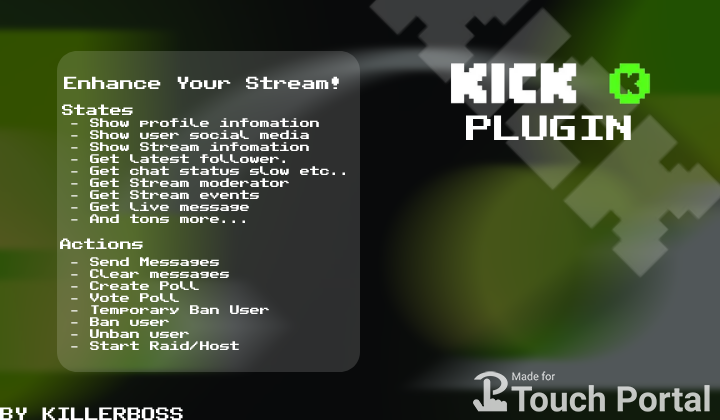
<style>
.page{position:relative;width:720px;height:420px}
.page>*{position:absolute;margin:0}
.t1{font:10px "PublicPixel";color:#ffffff}
.t2{font:14px "PublicPixel";color:#ffffff}
.t3{font:12px "PublicPixel";color:#ffffff}
.t4{font:28px "PublicPixel";color:#ffffff}
.t5{font:14.2px "PublicPixel";color:#ffffff}
</style>
<div class="page">
<p class="t1" style="left:59px;top:76px;width:286px;height:274px"><span class="t2">Enhance Your Stream!<br><br> </span><span class="t3">States<br>  </span>- Show profile infomation<br>  - Show user social media<br>  - Show Stream infomation<br>  - Get latest follower.<br>  - Get chat status slow etc..<br>  - Get Stream moderator<br>  - Get Stream events<br>  - Get live message<br>  - And tons more...<br><br> <span class="t3">Actions<br>  </span>- Send Messages<br>  - Clear messages<br>  - Create Poll<br>  - Vote Poll<br>  - Temporary Ban User<br>  - Ban user<br>  - Unban user<br>  - Start Raid/Host</p>
<p class="t4" style="left:466px;top:115px;width:165px;height:25px">PLUGIN</p>
<p class="t5" style="left:0px;top:407px;width:183px;height:13px">BY KILLERBOSS</p>
</div>
